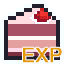
<style>
.page{position:relative;width:64px;height:64px}
.page>*{position:absolute;margin:0}
.t1{font:20px "FZHTJW--GB1-0";color:#e29a00;font-weight:bold}
</style>
<div class="page">
<p class="t1" style="left:23px;top:47px;width:39px;height:16px">EXP</p>
</div>
